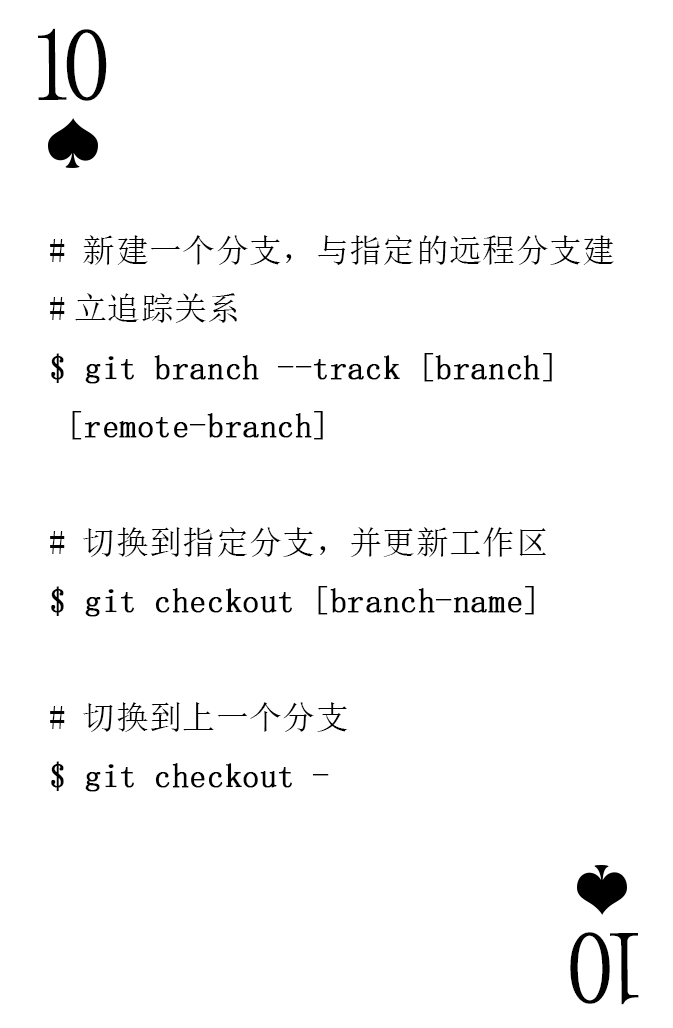
<style>
.page{position:relative;width:673px;height:1028px;background:#ffffff}
.page>*{position:absolute;margin:0}
.t1{font:104.2px "SimSun-ExtB";letter-spacing:-0.14em;color:#010101;scale:0.93 1}
.t2{font:33.3px "SimSun";color:#000000;font-weight:bold}
.t3{font:33.3px "SimSun";color:#000000}
</style>
<div class="page">
<p class="t1" style="left:38px;top:28px;width:69px;height:73px">10</p>
<p class="t2" style="left:50px;top:235px;width:564px;height:557px"><span class="t3"># 新建一个分支，与指定的远程分支建<br>#立追踪关系<br></span>$ git branch --track [branch]<br> [remote-branch]<br><span class="t3"><br># 切换到指定分支，并更新工作区<br></span>$ git checkout [branch-name]<br><span class="t3"><br># 切换到上一个分支<br></span>$ git checkout -</p>
<p class="t1" style="left:570px;top:932px;width:69px;height:73px;rotate:180deg">10</p>
</div>
